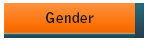
<style>
.page{position:relative;width:144px;height:40px}
.page>*{position:absolute;margin:0}
.t1{font:13.9px "BellGothicStd-Bold";color:#181818;scale:1.15 1}
</style>
<div class="page">
<p class="t1" style="left:46px;top:12px;width:48px;height:11px">Gender</p>
</div>
